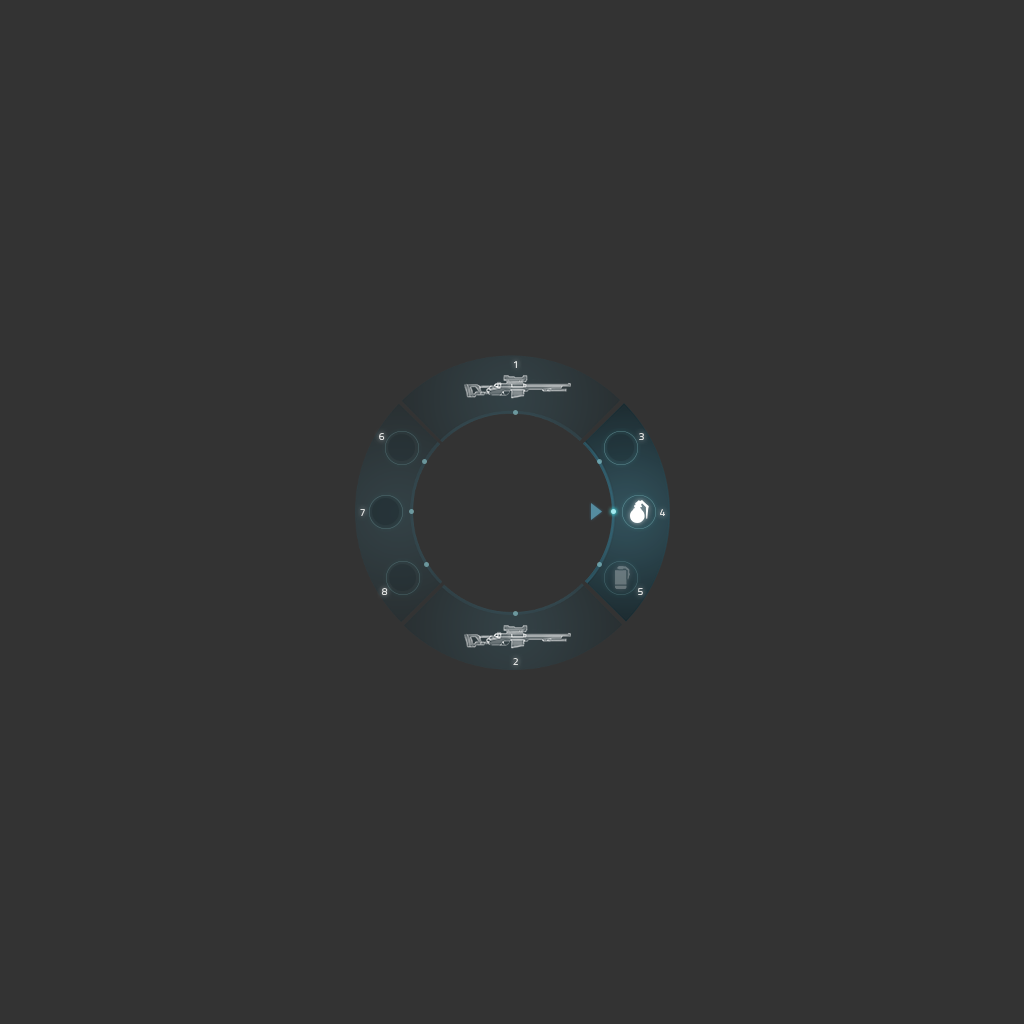
<style>
.page{position:relative;width:1024px;height:1024px;background:#333333}
.page>*{position:absolute;margin:0}
.t1{font:10px "Titillium-Light";color:#dddfde;text-transform:uppercase}
</style>
<div class="page">
<p class="t1" style="left:514px;top:361px;width:3px;height:7px">1</p>
<p class="t1" style="left:379px;top:433px;width:6px;height:7px">6</p>
<p class="t1" style="left:639px;top:433px;width:5px;height:7px">3</p>
<p class="t1" style="left:360px;top:509px;width:5px;height:7px">7</p>
<p class="t1" style="left:660px;top:509px;width:5px;height:7px">4</p>
<p class="t1" style="left:381px;top:588px;width:7px;height:7px">8</p>
<p class="t1" style="left:638px;top:588px;width:5px;height:7px">5</p>
<p class="t1" style="left:513px;top:658px;width:5px;height:7px">2</p>
</div>
